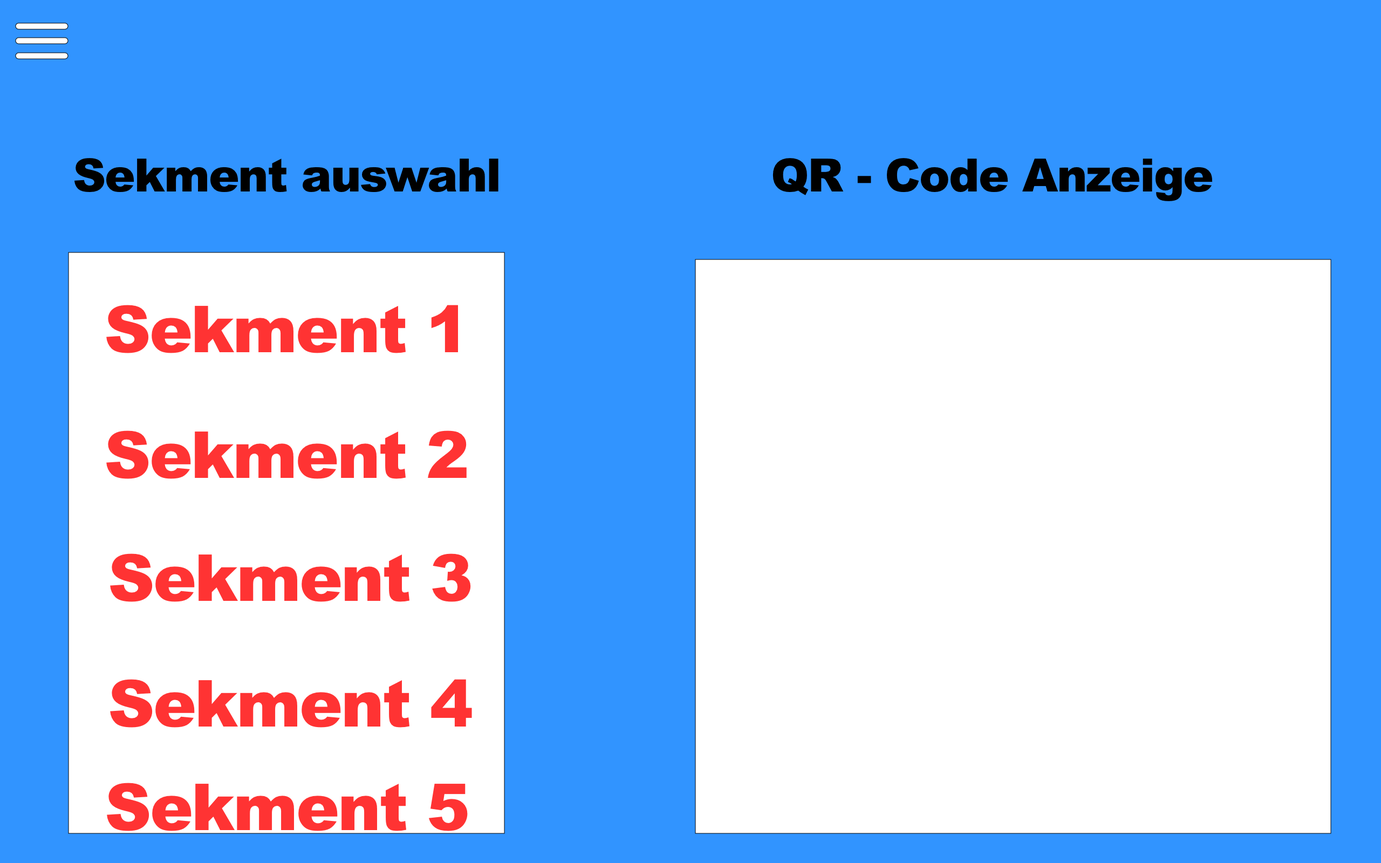
<style>
.page{position:relative;width:1381px;height:863px;background:#ffffff}
.page>*{position:absolute;margin:0}
.t1{font:45.9px "Arial-Black";letter-spacing:-0.024em;color:#000000}
.t2{font:64.7px "Arial-Black";letter-spacing:-0.024em;color:#ff3333}
</style>
<div class="page">
<p class="t1" style="left:74px;top:158px;width:425px;height:34px">Sekment auswahl</p>
<p class="t1" style="left:773px;top:158px;width:440px;height:43px">QR - Code Anzeige</p>
<p class="t2" style="left:106px;top:305px;width:352px;height:48px">Sekment 1</p>
<p class="t2" style="left:106px;top:431px;width:361px;height:48px">Sekment 2</p>
<p class="t2" style="left:110px;top:554px;width:361px;height:48px">Sekment 3</p>
<p class="t2" style="left:110px;top:679px;width:362px;height:49px">Sekment 4</p>
<p class="t2" style="left:107px;top:783px;width:361px;height:48px">Sekment 5</p>
</div>
